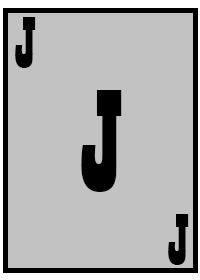
<style>
.page{position:relative;width:200px;height:280px;background:#c2c2c2}
.page>*{position:absolute;margin:0}
.t1{font:75px "Playbill";letter-spacing:-0.1em;color:#000000}
.t2{font:150px "Playbill";letter-spacing:-0.1em;color:#000000}
</style>
<div class="page">
<p class="t1" style="left:15px;top:17px;width:21px;height:51px">J</p>
<p class="t2" style="left:81px;top:90px;width:41px;height:102px">J</p>
<p class="t1" style="left:168px;top:214px;width:21px;height:51px">J</p>
</div>
